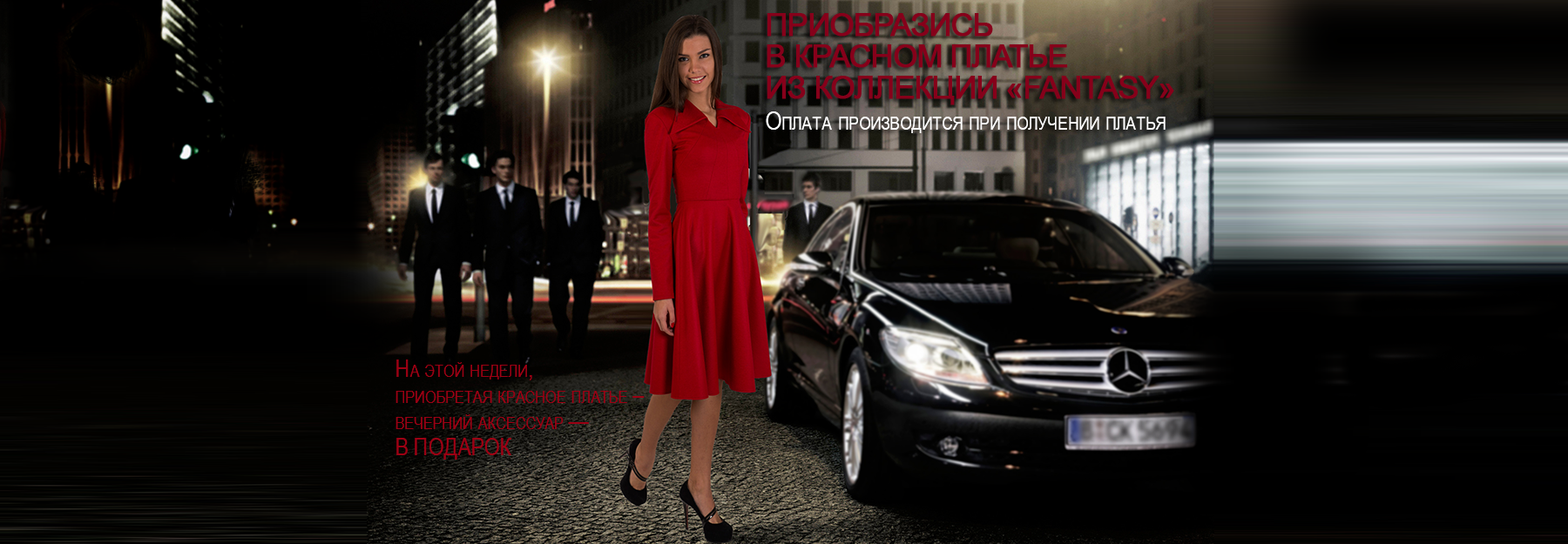
<style>
.page{position:relative;width:1568px;height:544px}
.page>*{position:absolute;margin:0}
.t1{font:31.4px/31.4px "ArialMT";letter-spacing:-0.05em;color:#86001a;text-transform:uppercase;font-weight:bold}
.t2{font:26.1px "ArialNarrow";color:#fefefe;font-variant:small-caps}
.t3{font:24.4px/26.1px "ArialNarrow";color:#9c0013;font-variant:small-caps}
</style>
<div class="page">
<p class="t1" style="left:767px;top:13px;width:407px;height:92px">Приобразись <br>в красном платье <br>из коллекции «FANTASY»</p>
<p class="t2" style="left:766px;top:112px;width:400px;height:21px">Оплата производится при получении платья</p>
<p class="t3" style="left:395px;top:360px;width:250px;height:100px">На этой недели, <br>приобретая красное платье – <br>вечерний аксессуар — <br>В ПОДАРОК</p>
</div>
